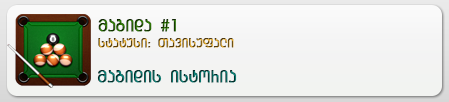
<style>
.page{position:relative;width:449px;height:102px}
.page>*{position:absolute;margin:0}
.t1{font:18px "GeoBauhausMtavr";font-weight:bold}
.t2{font:14px "GeoBauhausMtavr";font-weight:bold}
</style>
<div class="page">
<p class="t1" style="left:98px;top:19px;width:78px;height:13px">magida #1</p>
<p class="t2" style="left:98px;top:38px;width:136px;height:10px">statusi: Tavisufali</p>
<p class="t1" style="left:97px;top:70px;width:140px;height:13px">magidis istoria</p>
</div>
